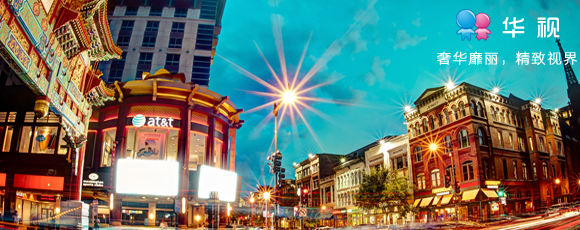
<style>
.page{position:relative;width:580px;height:230px}
.page>*{position:absolute;margin:0}
.t1{font:24px "BY-Forvi-[C]3.00";letter-spacing:0.1em;color:#ffffff}
.t2{font:14px "FZLTCXHJW--GB1-0";letter-spacing:0.1em;color:#ffffff;font-weight:bold}
</style>
<div class="page">
<p class="t1" style="left:502px;top:17px;width:58px;height:21px">华 视</p>
<p class="t2" style="left:437px;top:51px;width:141px;height:14px">奢华靡丽，精致视界</p>
</div>
